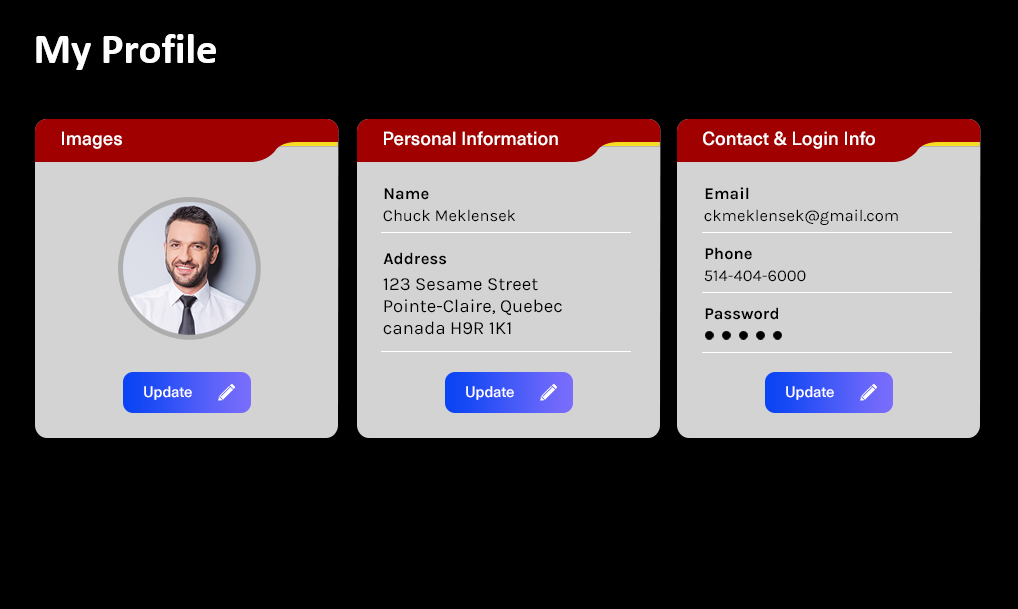
<style>
.page{position:relative;width:1018px;height:609px;background:#000000}
.page>*{position:absolute;margin:0}
.t1{font:18.5px "NeueHaasUnicaPro-Medium";color:#ffffff}
.t2{font:16.5px "Karla-Bold";color:#000000}
.t3{font:16.5px "Karla-Regular";color:#000000}
.t4{font:18.5px "Karla-Regular";color:#000000}
.t5{font:15px "NeueHaasUnicaPro-Medium";color:#ffffff}
</style>
<div class="page">
<p class="t1" style="left:62px;top:131px;width:60px;height:18px">Images</p>
<p class="t1" style="left:384px;top:131px;width:174px;height:15px">Personal Information</p>
<p class="t1" style="left:703px;top:131px;width:172px;height:18px">Contact &amp; Login Info</p>
<p class="t2" style="left:384px;top:188px;width:45px;height:12px">Name</p>
<p class="t2" style="left:705px;top:187px;width:44px;height:13px">Email</p>
<p class="t3" style="left:383px;top:209px;width:133px;height:13px">Chuck Meklensek</p>
<p class="t3" style="left:704px;top:209px;width:194px;height:16px">ckmeklensek@gmail.com</p>
<p class="t2" style="left:383px;top:252px;width:64px;height:13px">Address</p>
<p class="t2" style="left:705px;top:247px;width:47px;height:13px">Phone</p>
<p class="t3" style="left:704px;top:270px;width:102px;height:12px">514-404-6000</p>
<p class="t4" style="left:383px;top:278px;width:179px;height:57px">123 Sesame Street Pointe-Claire, Quebec<br>canada H9R 1K1</p>
<p class="t2" style="left:705px;top:307px;width:73px;height:13px">Password</p>
<p class="t5" style="left:144px;top:386px;width:48px;height:14px">Update</p>
<p class="t5" style="left:466px;top:386px;width:48px;height:14px">Update</p>
<p class="t5" style="left:786px;top:386px;width:48px;height:14px">Update</p>
</div>
